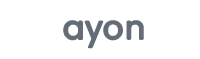
<style>
.page{position:relative;width:200px;height:59px;background:#ffffff}
.page>*{position:absolute;margin:0}
.t1{font:32px "Poppins-Regular";letter-spacing:0.015em;color:#646c76}
.t2{font:32px "Poppins-Regular";letter-spacing:0.025em;color:#646c76}
.t3{font:32px "Poppins-Regular";letter-spacing:0.045em;color:#646c76}
.t4{font:32px "Poppins-Regular";color:#646c76}
</style>
<div class="page">
<p class="t1" style="left:64px;top:21px;width:79px;height:27px">a<span class="t2">y</span><span class="t3">o</span><span class="t4">n</span></p>
</div>
